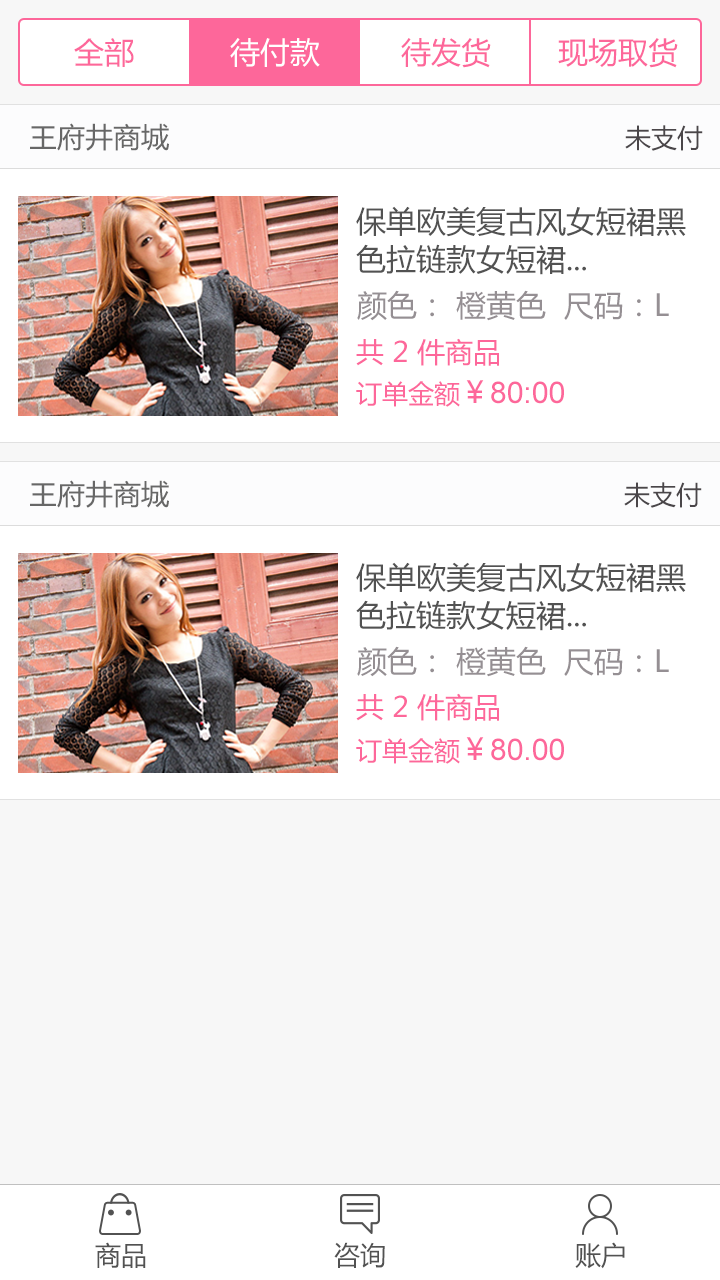
<style>
.page{position:relative;width:720px;height:1280px;background:#ffffff}
.page>*{position:absolute;margin:0}
.t1{font:30px "MicrosoftYaHei";color:#fd679a}
.t2{font:30px "MicrosoftYaHei";color:#ffffff}
.t3{font:28px "MicrosoftYaHei";color:#666666}
.t4{font:26px "MicrosoftYaHei";color:#4a4649}
.t5{font:30px/38px "MicrosoftYaHei";color:#525252}
.t6{font:30px "MicrosoftYaHei";color:#958f93}
.t7{font:28px "MicrosoftYaHei";color:#fd679a}
.t8{font:30px "ArialMT";color:#fd679a}
.t9{font:26px "MicrosoftYaHei";color:#fd679a}
.t10{font:26px "MicrosoftYaHei";color:#525252}
</style>
<div class="page">
<p class="t1" style="left:74px;top:38px;width:60px;height:29px">全部</p>
<p class="t2" style="left:230px;top:38px;width:90px;height:29px">待付款</p>
<p class="t1" style="left:401px;top:37px;width:90px;height:31px">待发货</p>
<p class="t1" style="left:558px;top:38px;width:120px;height:30px">现场取货</p>
<p class="t3" style="left:30px;top:123px;width:139px;height:28px">王府井商城</p>
<p class="t4" style="left:625px;top:125px;width:78px;height:26px">未支付</p>
<p class="t5" style="left:356px;top:206px;width:330px;height:69px">保单欧美复古风女短裙黑<br>色拉链款女短裙...</p>
<p class="t6" style="left:357px;top:290px;width:312px;height:31px">颜色： 橙黄色  尺码：L</p>
<p class="t7" style="left:356px;top:338px;width:143px;height:28px">共 2 件商品</p>
<p class="t8" style="left:356px;top:380px;width:208px;height:27px"><span class="t9">订单金额</span><span class="t1">￥</span>80:00</p>
<p class="t3" style="left:30px;top:480px;width:139px;height:28px">王府井商城</p>
<p class="t4" style="left:624px;top:482px;width:78px;height:26px">未支付</p>
<p class="t5" style="left:356px;top:562px;width:330px;height:69px">保单欧美复古风女短裙黑<br>色拉链款女短裙...</p>
<p class="t6" style="left:357px;top:646px;width:312px;height:31px">颜色： 橙黄色  尺码：L</p>
<p class="t7" style="left:356px;top:693px;width:143px;height:28px">共 2 件商品</p>
<p class="t8" style="left:356px;top:737px;width:208px;height:27px"><span class="t9">订单金额</span><span class="t1">￥</span>80.00</p>
<p class="t10" style="left:95px;top:1242px;width:51px;height:26px">商品</p>
<p class="t10" style="left:334px;top:1242px;width:51px;height:26px">咨询</p>
<p class="t10" style="left:575px;top:1242px;width:50px;height:27px">账户</p>
</div>
